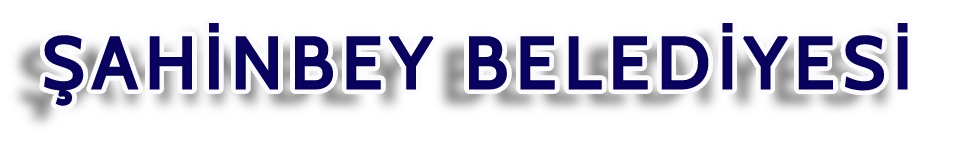
<style>
.page{position:relative;width:960px;height:145px;background:#ffffff}
.page>*{position:absolute;margin:0}
.t1{font:72px "Cabin-Regular";letter-spacing:0.118em;color:#0a0364}
</style>
<div class="page">
<p class="t1" style="left:43px;top:22px;width:866px;height:85px">ŞAHİNBEY BELEDİYESİ</p>
</div>
